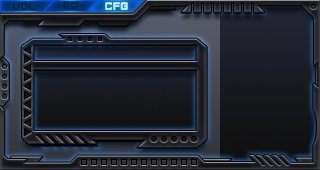
<style>
.page{position:relative;width:320px;height:170px}
.page>*{position:absolute;margin:0}
.t1{font:10.2px "Furore";letter-spacing:0.05em;color:#01224e;font-weight:bold}
.t2{font:10.2px "Furore";letter-spacing:0.05em;color:#01214b;font-weight:bold}
.t3{font:10.2px "Furore";letter-spacing:0.05em;font-weight:bold}
</style>
<div class="page">
<p class="t1" style="left:12px;top:2px;width:24px;height:9px">VOL</p>
<p class="t1" style="left:12px;top:2px;width:24px;height:9px">VOL</p>
<p class="t2" style="left:63px;top:2px;width:15px;height:8px">EQ</p>
<p class="t2" style="left:63px;top:2px;width:15px;height:8px">EQ</p>
<p class="t3" style="left:105px;top:2px;width:23px;height:8px">CFG</p>
</div>
